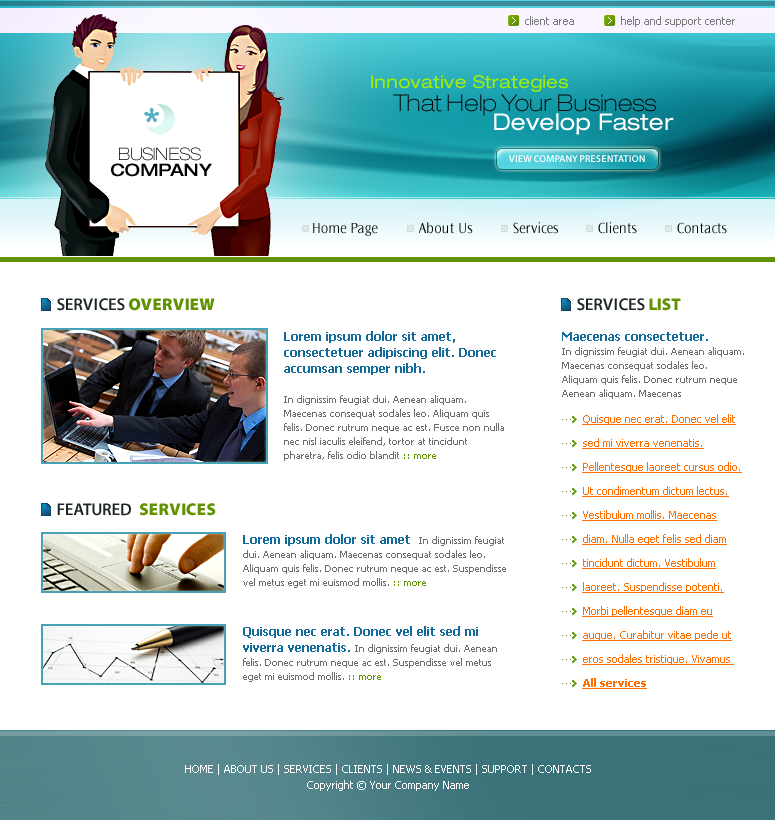
<style>
.page{position:relative;width:775px;height:820px;background:#ffffff}
.page>*{position:absolute;margin:0}
.t1{font:11px "Tahoma";color:#7b7b7b}
.t2{font:18px "HelveticaNeueLTPro-Ex";color:#a2ee09}
.t3{font:23px "HelveticaNeueLTPro-ThEx";color:#000000}
.t4{font:23px "HelveticaNeueLTPro-Ex";color:#ffffff}
.t5{font:17px/16.2px "HelveticaNeueLTPro-ThEx";color:#000000}
.t6{font:17px/16.2px "HelveticaNeueLTPro-MdEx";color:#000000}
.t7{font:10px "MyriadPro-Semibold";color:#ffffff}
.t8{font:15px "OceanSansStd-Light";color:#000000}
.t9{font:17px "MyriadPro-Semibold";color:#1d2527}
.t10{font:17px "MyriadPro-Black";color:#619201}
.t11{font:10px/14px "Tahoma";color:#6d6d6d}
.t12{font:12px/16px "Tahoma-Bold";color:#136b9b}
.t13{font:10px/14px "Tahoma";color:#619201}
.t14{font:11px/24px "Tahoma";color:#ff6c00;text-decoration:underline}
.t15{font:11px/24px "Tahoma-Bold";color:#ff6c00;text-decoration:underline}
.t16{font:11px/16px "Tahoma";color:#ffffff}
</style>
<div class="page">
<p class="t1" style="left:525px;top:16px;width:49px;height:9px">client area</p>
<p class="t1" style="left:621px;top:16px;width:114px;height:11px">help and support center</p>
<p class="t2" style="left:371px;top:75px;width:197px;height:17px">Innovative Strategies</p>
<p class="t3" style="left:393px;top:94px;width:263px;height:22px">That Help Your Business</p>
<p class="t4" style="left:494px;top:113px;width:180px;height:22px">Develop Faster</p>
<p class="t5" style="left:111px;top:147px;width:101px;height:30px;text-align:center">BUSINESS<br> <span class="t6">COMPANY</span></p>
<p class="t7" style="left:508px;top:155px;width:137px;height:7px">VIEW COMPANY PRESENTATION</p>
<p class="t8" style="left:418px;top:222px;width:55px;height:12px">About Us</p>
<p class="t8" style="left:513px;top:222px;width:45px;height:12px">Services</p>
<p class="t8" style="left:598px;top:222px;width:39px;height:12px">Clients</p>
<p class="t8" style="left:677px;top:222px;width:50px;height:12px">Contacts</p>
<p class="t8" style="left:313px;top:223px;width:65px;height:13px">Home Page</p>
<p class="t9" style="left:57px;top:298px;width:158px;height:13px">SERVICES <span class="t10">OVERVIEW</span></p>
<p class="t9" style="left:577px;top:298px;width:104px;height:13px">SERVICES <span class="t10">LIST</span></p>
<p class="t11" style="left:284px;top:331px;width:220px;height:130px"><span class="t12">Lorem ipsum dolor sit amet, consectetuer adipiscing elit. Donec accumsan semper nibh. <br><br></span>In dignissim feugiat dui. Aenean aliquam. Maecenas consequat sodales leo. Aliquam quis felis. Donec rutrum neque ac est. Fusce non nulla nec nisl iaculis eleifend, tortor at tincidunt pharetra, felis odio blandit <span class="t13">:: more</span></p>
<p class="t11" style="left:562px;top:332px;width:182px;height:67px"><span class="t12">Maecenas consectetuer.<br></span>In dignissim feugiat dui. Aenean aliquam. Maecenas consequat sodales leo. Aliquam quis felis. Donec rutrum neque Aenean aliquam. Maecenas</p>
<p class="t14" style="left:582px;top:414px;width:160px;height:275px">Quisque nec erat. Donec vel elit sed mi viverra venenatis. Pellentesque laoreet cursus odio. Ut condimentum dictum lectus. Vestibulum mollis. Maecenas diam. Nulla eget felis sed diam tincidunt dictum. Vestibulum laoreet. Suspendisse potenti. Morbi pellentesque diam eu augue. Curabitur vitae pede ut eros sodales tristique. Vivamus <br><span class="t15">All services</span></p>
<p class="t9" style="left:57px;top:503px;width:159px;height:13px">FEATURED  <span class="t10">SERVICES</span></p>
<p class="t11" style="left:243px;top:534px;width:263px;height:54px"><span class="t12">Lorem ipsum dolor sit amet  </span>In dignissim feugiat dui. Aenean aliquam. Maecenas consequat sodales leo. Aliquam quis felis. Donec rutrum neque ac est. Suspendisse vel metus eget mi euismod mollis. <span class="t13">:: more</span></p>
<p class="t11" style="left:243px;top:626px;width:254px;height:56px"><span class="t12">Quisque nec erat. Donec vel elit sed mi viverra venenatis. </span>In dignissim feugiat dui. Aenean felis. Donec rutrum neque ac est. Suspendisse vel metus eget mi euismod mollis. <span class="t13">:: more</span></p>
<p class="t16" style="left:185px;top:764px;width:406px;height:27px;text-align:center">HOME | ABOUT US | SERVICES | CLIENTS | NEWS &amp; EVENTS | SUPPORT | CONTACTS<br>Copyright © Your Company Name</p>
</div>
